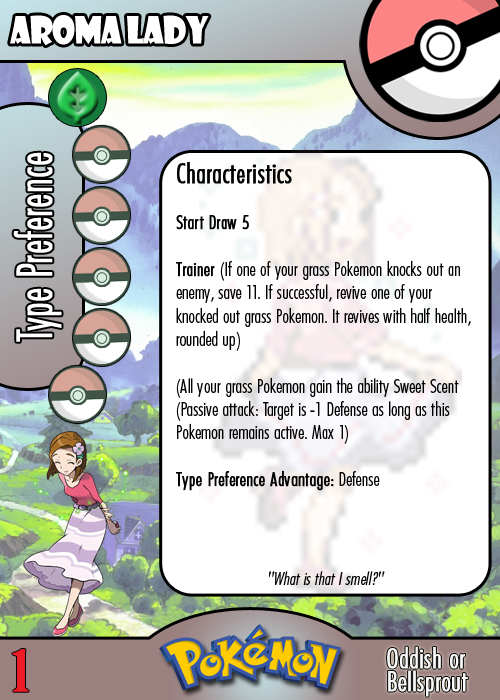
<style>
.page{position:relative;width:500px;height:700px;background:#ffffff}
.page>*{position:absolute;margin:0}
.t1{font:36.7px "ShowcardGothic-Reg";letter-spacing:-0.025em;color:#ffffff;scale:0.91 1}
.t2{font:46.7px "Futura-CondensedLight";color:#ffffff;font-weight:bold;scale:0.83 1}
.t3{font:19.4px "FuturaCondensedBQ-Light";color:#010101}
.t4{font:27.8px "FuturaCondensedBQ-Light";color:#010101;font-weight:bold}
.t5{font:19.4px "FuturaCondensedBQ-Light";color:#010101;font-weight:bold}
.t6{font:18.1px "FuturaCondensedBQ-Light";color:#010101;font-style:italic}
.t7{font:55.6px "BirchStd";color:#ed1c24;font-weight:bold;scale:1.5 1}
.t8{font:27.8px "FuturaCondensedBQ-Light";color:#f9f9f9;font-weight:bold}
</style>
<div class="page">
<p class="t1" style="left:10px;top:15px;width:199px;height:31px">Aroma Lady</p>
<p class="t2" style="left:13px;top:152px;width:49px;height:190px;rotate:-90deg">Type Preference</p>
<p class="t3" style="left:176px;top:162px;width:295px;height:329px"><span class="t4">Characteristics<br></span><span class="t5"><br>Start Draw 5<br><br>Trainer </span>(If one of your grass Pokemon knocks out an enemy, save 11. If successful, revive one of your knocked out grass Pokemon. It revives with half health, rounded up)<br><br>(All your grass Pokemon gain the ability Sweet Scent (Passive attack: Target is -1 Defense as long as this Pokemon remains active. Max 1)<br><br><span class="t5">Type Preference Advantage:</span> Defense</p>
<p class="t6" style="left:269px;top:571px;width:116px;height:14px">"What is that I smell?"</p>
<p class="t7" style="left:12px;top:649px;width:17px;height:43px">1</p>
<p class="t8" style="left:387px;top:646px;width:78px;height:23px">Oddish or</p>
<p class="t8" style="left:388px;top:670px;width:80px;height:27px">Bellsprout</p>
</div>
